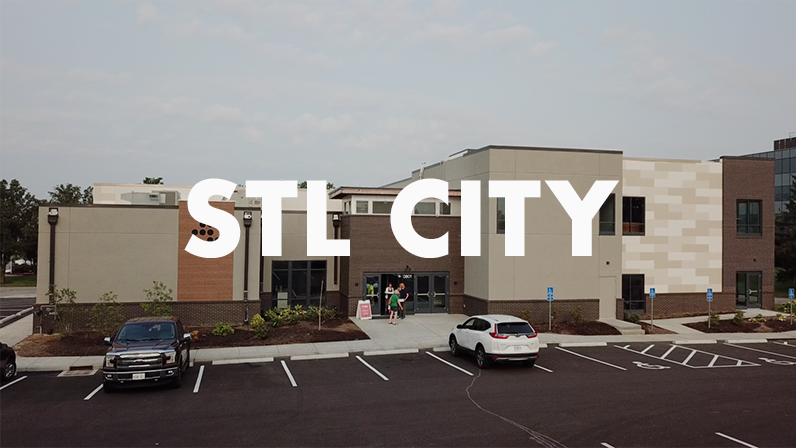
<style>
.page{position:relative;width:796px;height:448px}
.page>*{position:absolute;margin:0}
.t1{font:100px "Futura-Bold";color:#fafafa}
</style>
<div class="page">
<p class="t1" style="left:184px;top:178px;width:436px;height:80px">STL CITY</p>
</div>
